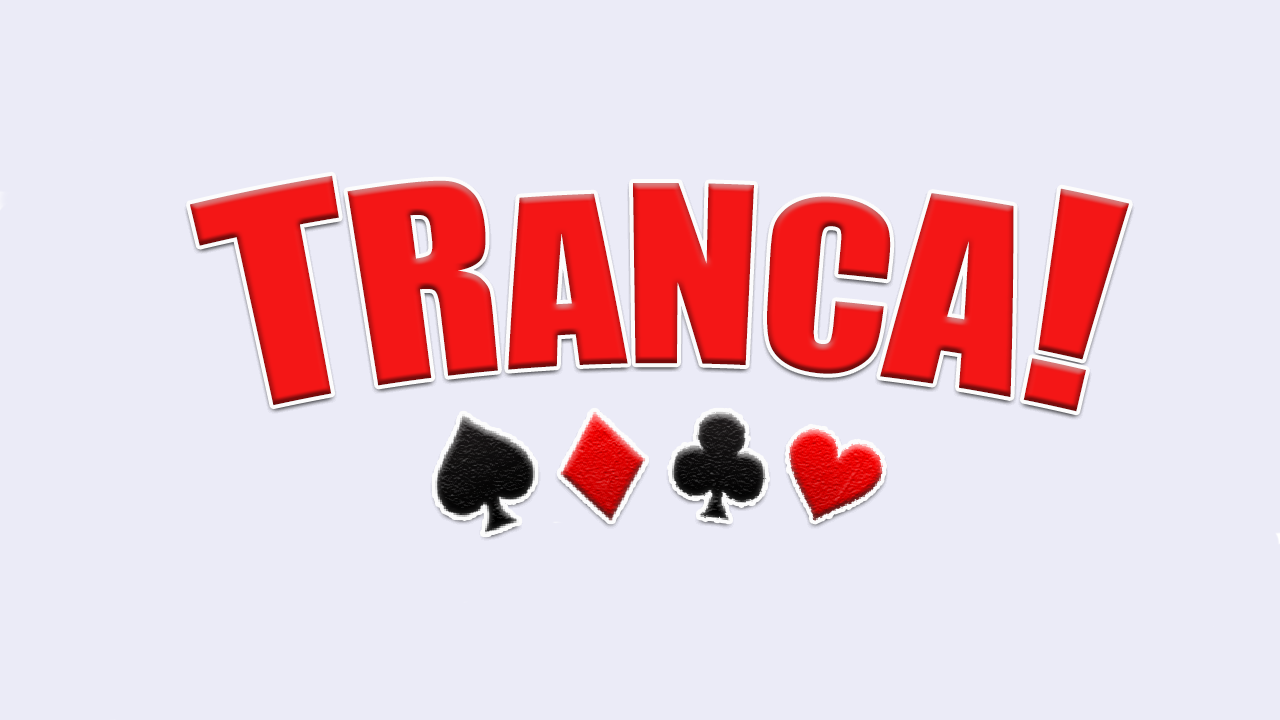
<style>
.page{position:relative;width:1280px;height:720px;background:#ebebf7}
.page>*{position:absolute;margin:0}
.t1{font:270.3px "Impact";color:#f41616}
.t2{font:248.7px "Impact";color:#f41616}
.t3{font:216.2px "Impact";color:#f41616}
.t4{font:227.1px "Impact";color:#f41616}
.t5{font:237.9px "Impact";color:#f41616}
</style>
<div class="page">
<p class="t1" style="left:190px;top:175px;width:939px;height:237px">T<span class="t2">R</span><span class="t3">A</span><span class="t4">N</span><span class="t3">C</span><span class="t5">A</span>!</p>
</div>
